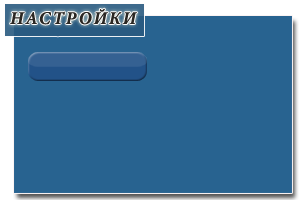
<style>
.page{position:relative;width:300px;height:200px;background:#286390}
.page>*{position:absolute;margin:0}
.t1{font:18px "MinionPro-BoldIt";letter-spacing:0.1em;color:#2a2723}
</style>
<div class="page">
<p class="t1" style="left:10px;top:8px;width:128px;height:17px">НАСТРОЙКИ</p>
</div>
